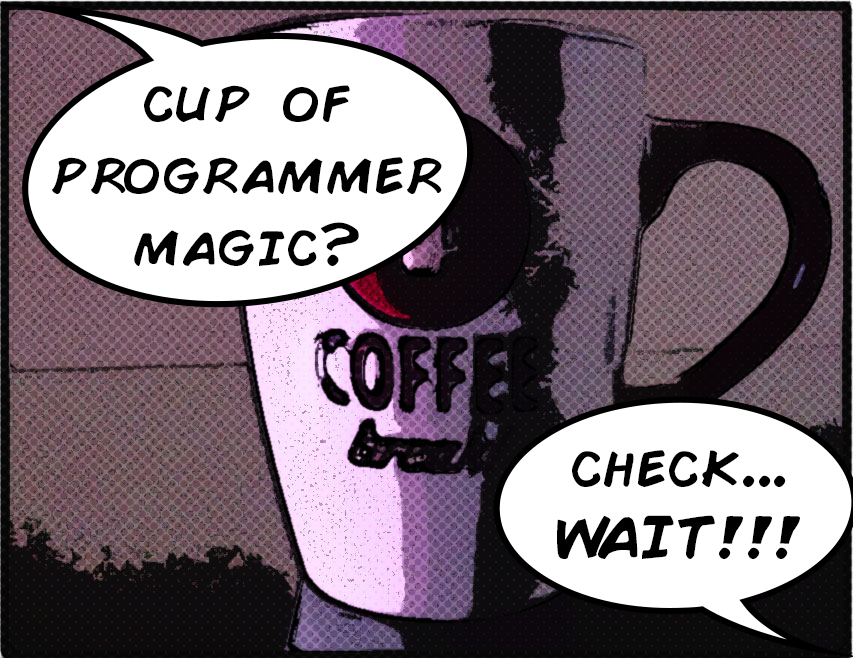
<style>
.page{position:relative;width:853px;height:658px;background:#ffffff}
.page>*{position:absolute;margin:0}
.t1{font:60px "ComicBook";color:#000000}
</style>
<div class="page">
<p class="t1" style="left:52px;top:85px;width:390px;height:181px;text-align:center">cup of<br>programmer<br>magic?</p>
<p class="t1" style="left:557px;top:450px;width:243px;height:109px;text-align:center">check...<br>WAIT!!!</p>
</div>
